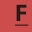
<style>
.page{position:relative;width:32px;height:32px;background:#cd4d4d}
.page>*{position:absolute;margin:0}
.t1{font:24px "MyriadPro-Bold";color:#271a1a;text-decoration:underline}
</style>
<div class="page">
<p class="t1" style="left:15px;top:4px;width:14px;height:22px">F</p>
</div>
